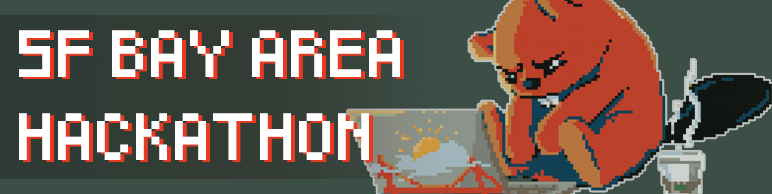
<style>
.page{position:relative;width:772px;height:194px;background:#3c4e46}
.page>*{position:absolute;margin:0}
.t1{font:38.9px/82.4px "Pixeled";color:#ffffff}
.t2{font:38.9px/82.4px "Pixeled"}
</style>
<div class="page">
<p class="t1" style="left:19px;top:30px;width:381px;height:130px">SF BAY AREA<br>HACKATHON</p>
<p class="t2" style="left:23px;top:32px;width:381px;height:130px">SF BAY AREA<br>HACKATHON</p>
</div>
